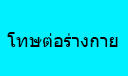
<style>
.page{position:relative;width:128px;height:76px;background:#00f0ff}
.page>*{position:absolute;margin:0}
.t1{font:18px "Tahoma";color:#000203}
</style>
<div class="page">
<p class="t1" style="left:7px;top:32px;width:111px;height:15px">โทษต่อร่างกาย</p>
</div>
